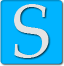
<style>
.page{position:relative;width:64px;height:66px;background:#00b4ff}
.page>*{position:absolute;margin:0}
.t1{font:73.5px "Palatino-Roman";color:#e3e3e3}
</style>
<div class="page">
<p class="t1" style="left:14px;top:4px;width:35px;height:54px">S</p>
</div>
